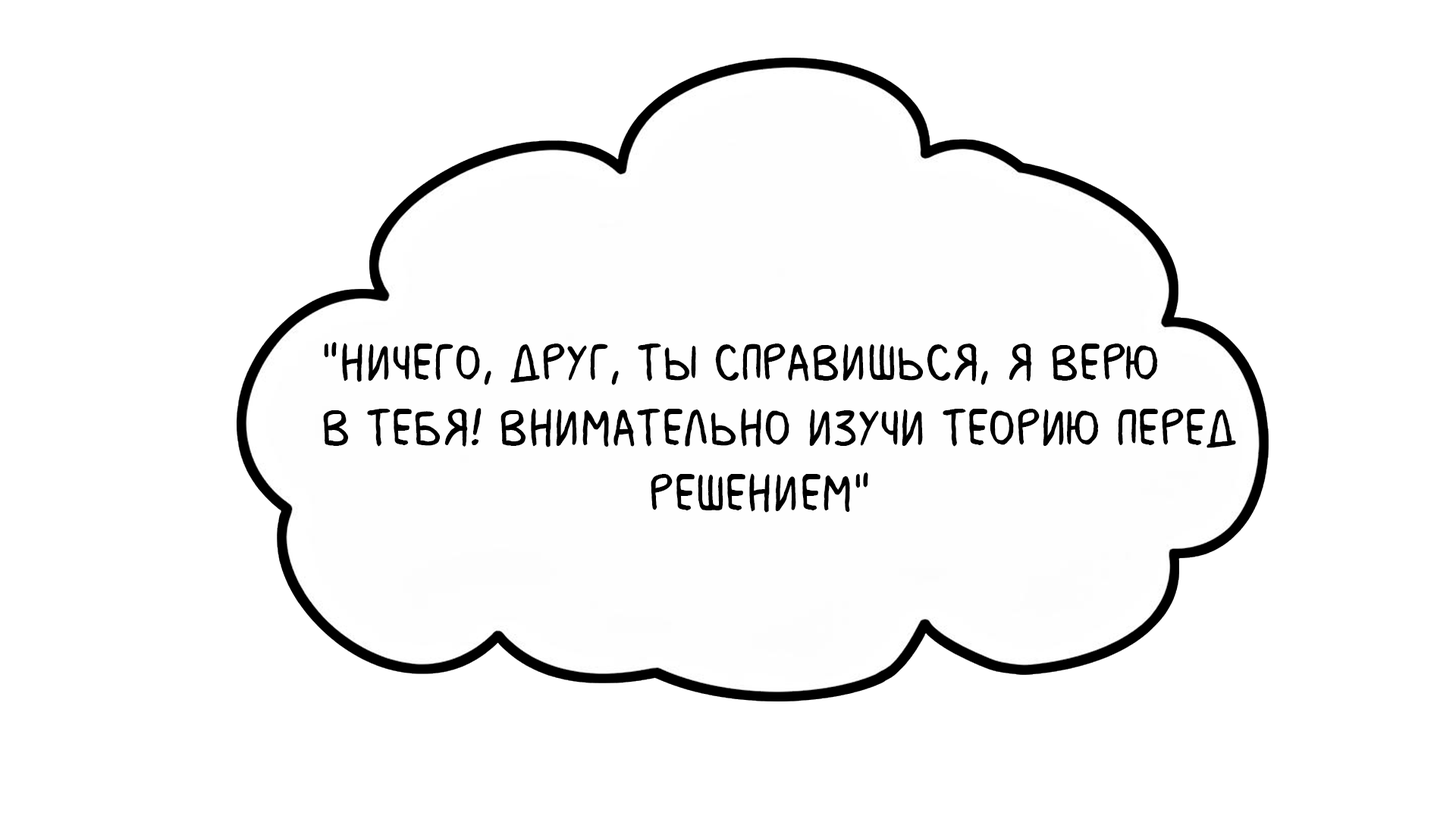
<style>
.page{position:relative;width:1456px;height:819px;background:#ffffff}
.page>*{position:absolute;margin:0}
.t1{font:54.6px "MilkMustacheBB";color:#000000}
</style>
<div class="page">
<p class="t1" style="left:323px;top:342px;width:913px;height:171px">"Ничего, друг, ты справишься, я верю <br>в тебя! Внимательно изучи теорию перед <br>            решением"</p>
</div>
